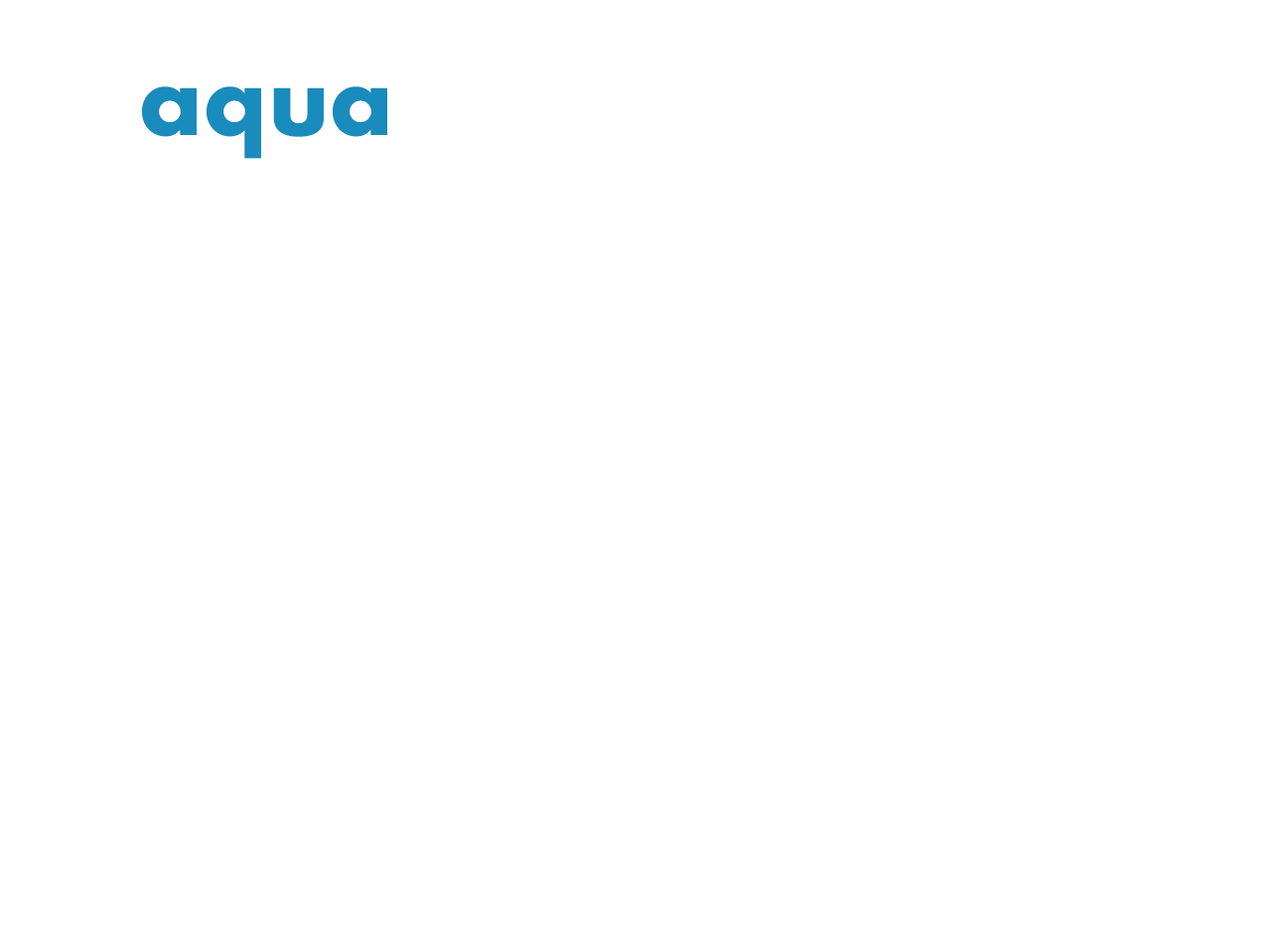
<style>
.page{position:relative;width:1273px;height:937px;background:#ffffff}
.page>*{position:absolute;margin:0}
.t1{font:91.5px "Futura-Bold";color:#198bbc}
</style>
<div class="page">
<p class="t1" style="left:142px;top:86px;width:245px;height:73px">aqua</p>
</div>
